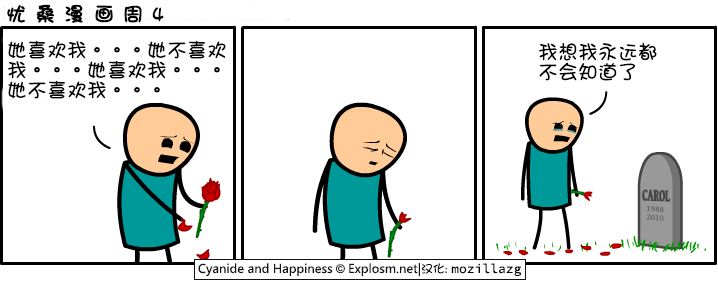
<style>
.page{position:relative;width:718px;height:304px;background:#ffffff}
.page>*{position:absolute;margin:0}
.t1{font:20px "DFGirl";letter-spacing:0.44em;color:#000000;font-weight:bold}
.t2{font:20px/20px "DFGirl";color:#000000}
</style>
<div class="page">
<p class="t1" style="left:7px;top:4px;width:157px;height:19px">忧桑漫画周4</p>
<p class="t2" style="left:7px;top:40px;width:219px;height:59px">她喜欢我。。。她不喜欢<br>我。。。她喜欢我。。。<br>她不喜欢我。。。</p>
<p class="t2" style="left:538px;top:42px;width:119px;height:39px">我想我永远都<br>不会知道了</p>
</div>
